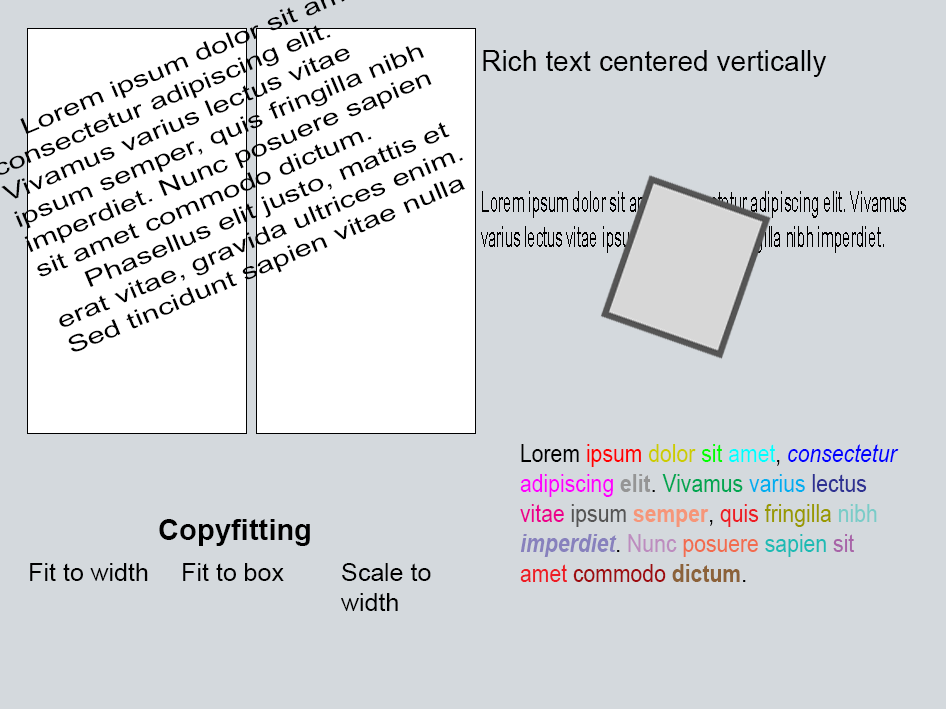
<style>
.page{position:relative;width:946px;height:709px;background:#d4d9dd}
.page>*{position:absolute;margin:0}
.t1{font:29.2px "ArialMT";color:#000000;scale:0.97 1}
.t2{font:29.2px "ArialMT";color:#000000;scale:0.52 1}
.t3{font:25px "Arial-ItalicMT";color:#0000ff;scale:0.85 1}
.t4{font:25px "ArialMT";color:#000000;scale:0.85 1}
.t5{font:25px "ArialMT";color:#ff0000;scale:0.85 1}
.t6{font:25px "ArialMT";color:#cccc00;scale:0.85 1}
.t7{font:25px "ArialMT";color:#00ff00;scale:0.85 1}
.t8{font:25px "ArialMT";color:#00ffff;scale:0.85 1}
.t9{font:25px "ArialMT";color:#ff00ff;scale:0.85 1}
.t10{font:25px "Arial-BoldMT";color:#959595;scale:0.85 1}
.t11{font:25px "ArialMT";color:#00a651;scale:0.85 1}
.t12{font:25px "ArialMT";color:#00aeef;scale:0.85 1}
.t13{font:25px "ArialMT";color:#2e3192;scale:0.85 1}
.t14{font:25px "ArialMT";color:#ec008c;scale:0.85 1}
.t15{font:25px "ArialMT";color:#555555;scale:0.85 1}
.t16{font:25px "Arial-BoldMT";color:#f69679;scale:0.85 1}
.t17{font:25px "ArialMT";color:#ed1c24;scale:0.85 1}
.t18{font:25px "ArialMT";color:#999900;scale:0.85 1}
.t19{font:25px "ArialMT";color:#7accc8;scale:0.85 1}
.t20{font:25px "Arial-BoldItalicMT";color:#8781bd;scale:0.85 1}
.t21{font:25px "ArialMT";color:#bd8cbf;scale:0.85 1}
.t22{font:25px "ArialMT";color:#f26c4f;scale:0.85 1}
.t23{font:25px "ArialMT";color:#1cbbb4;scale:0.85 1}
.t24{font:25px "ArialMT";color:#a864a8;scale:0.85 1}
.t25{font:25px "ArialMT";color:#9e0b0f;scale:0.85 1}
.t26{font:25px "Arial-BoldMT";color:#8c6239;scale:0.85 1}
.t27{font:29.2px "Arial-BoldMT";color:#000000}
.t28{font:25px "ArialMT";color:#000000}
</style>
<div class="page">
<p class="t1" style="left:483px;top:50px;width:344px;height:27px">Rich text centered vertically</p>
<p class="t2" style="left:481px;top:191px;width:425px;height:62px">Lorem ipsum dolor sit amet, consectetur adipiscing elit. Vivamus varius lectus vitae ipsum semper, quis fringilla nibh imperdiet.</p>
<p class="t3" style="left:520px;top:444px;width:379px;height:138px"><span class="t4">Lorem </span><span class="t5">ipsum </span><span class="t6">dolor </span><span class="t7">sit </span><span class="t8">amet</span><span class="t4">, </span>consectetur <span class="t9">adipiscing </span><span class="t10">elit</span><span class="t4">. </span><span class="t11">Vivamus </span><span class="t12">varius </span><span class="t13">lectus </span><span class="t14">vitae </span><span class="t15">ipsum </span><span class="t16">semper</span><span class="t4">, </span><span class="t17">quis </span><span class="t18">fringilla </span><span class="t19">nibh </span><span class="t20">imperdiet</span><span class="t4">. </span><span class="t21">Nunc </span><span class="t22">posuere </span><span class="t23">sapien </span><span class="t24">sit </span><span class="t17">amet </span><span class="t25">commodo </span><span class="t26">dictum</span><span class="t4">.</span></p>
<p class="t27" style="left:159px;top:519px;width:151px;height:27px">Copyfitting</p>
<p class="t28" style="left:30px;top:563px;width:118px;height:18px">Fit to width</p>
<p class="t28" style="left:183px;top:563px;width:101px;height:18px">Fit to box</p>
<p class="t28" style="left:341px;top:563px;width:90px;height:48px">Scale to width</p>
</div>
